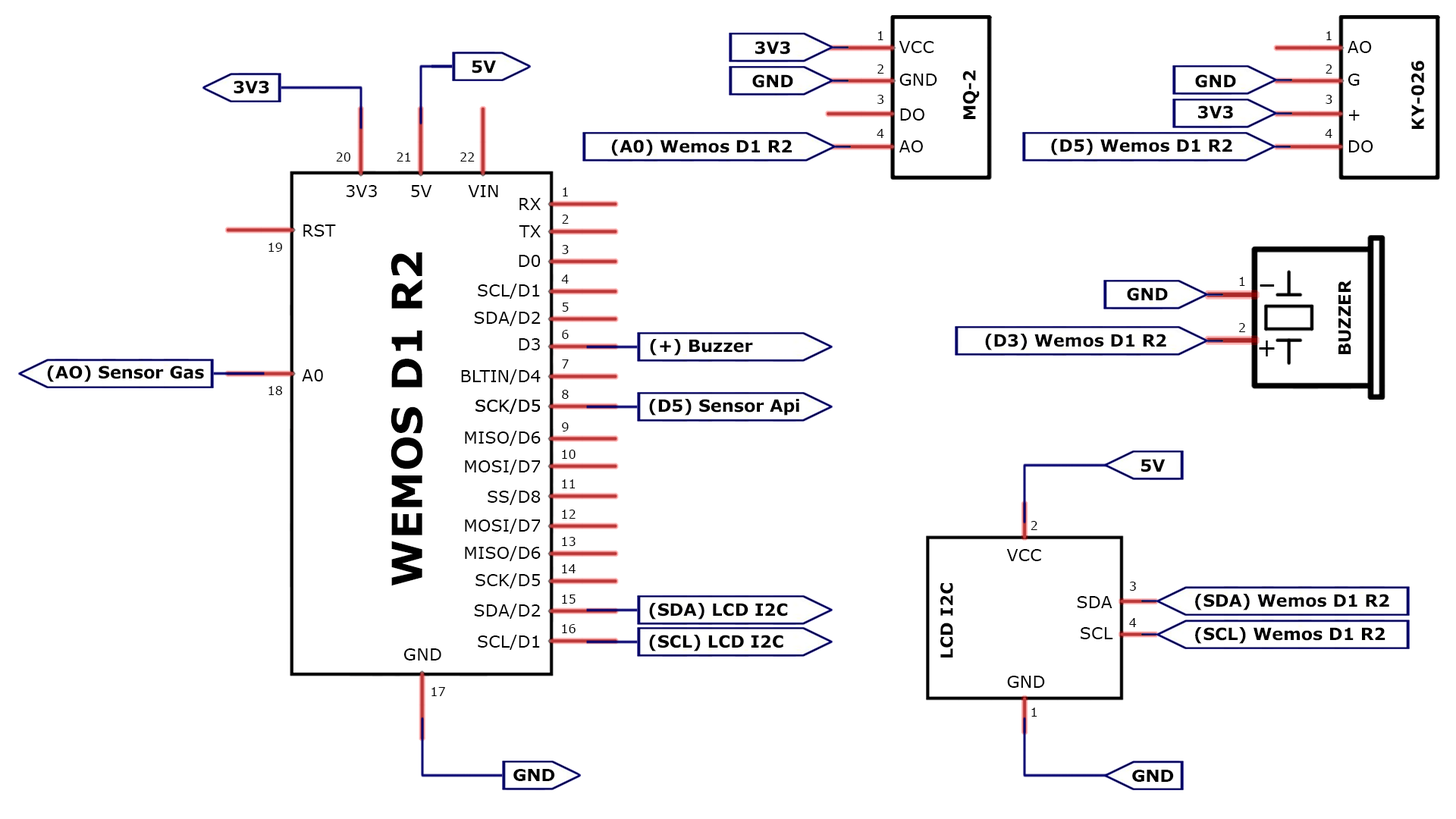
<style>
.page{position:relative;width:1456px;height:819px;background:#ffffff}
.page>*{position:absolute;margin:0}
.t1{font:17px "Verdana-Bold";color:#000000}
.t2{font:12.1px "Verdana";color:#000000}
.t3{font:17px "Verdana";color:#000000}
.t4{font:16.9px "Verdana-Bold";color:#000000}
.t5{font:17.1px "Verdana-Bold";color:#000000}
.t6{font:42.1px "Verdana-Bold";color:#000000}
.t7{font:24.6px "Verdana";color:#000000;scale:1.87 1}
.t8{font:24.9px "Verdana";color:#000000}
</style>
<div class="page">
<p class="t1" style="left:755px;top:41px;width:35px;height:14px">3V3</p>
<p class="t2" style="left:878px;top:31px;width:5px;height:9px">1</p>
<p class="t3" style="left:899px;top:41px;width:35px;height:12px">VCC</p>
<p class="t2" style="left:1326px;top:31px;width:6px;height:9px">1</p>
<p class="t3" style="left:1348px;top:41px;width:24px;height:12px">AO</p>
<p class="t4" style="left:472px;top:60px;width:24px;height:14px">5V</p>
<p class="t2" style="left:877px;top:64px;width:7px;height:10px">2</p>
<p class="t2" style="left:1326px;top:64px;width:6px;height:10px">2</p>
<p class="t5" style="left:1411px;top:61px;width:13px;height:68px;rotate:-90deg">KY-026</p>
<p class="t1" style="left:752px;top:74px;width:41px;height:14px">GND</p>
<p class="t3" style="left:899px;top:74px;width:38px;height:12px">GND</p>
<p class="t5" style="left:962px;top:71px;width:18px;height:48px;rotate:-90deg">MQ-2</p>
<p class="t1" style="left:1195px;top:74px;width:41px;height:14px">GND</p>
<p class="t3" style="left:1348px;top:74px;width:12px;height:12px">G</p>
<p class="t4" style="left:234px;top:80px;width:35px;height:14px">3V3</p>
<p class="t2" style="left:877px;top:95px;width:7px;height:9px">3</p>
<p class="t2" style="left:1326px;top:95px;width:6px;height:9px">3</p>
<p class="t3" style="left:900px;top:108px;width:24px;height:13px">DO</p>
<p class="t1" style="left:1198px;top:105px;width:35px;height:14px">3V3</p>
<p class="t3" style="left:1348px;top:110px;width:12px;height:11px">+</p>
<p class="t2" style="left:877px;top:129px;width:7px;height:9px">4</p>
<p class="t2" style="left:1325px;top:129px;width:7px;height:9px">4</p>
<p class="t1" style="left:611px;top:140px;width:181px;height:16px">(A0) Wemos D1 R2</p>
<p class="t3" style="left:899px;top:140px;width:24px;height:12px">AO</p>
<p class="t1" style="left:1051px;top:139px;width:181px;height:16px">(D5) Wemos D1 R2</p>
<p class="t3" style="left:1348px;top:140px;width:25px;height:12px">DO</p>
<p class="t2" style="left:336px;top:152px;width:14px;height:10px">20</p>
<p class="t2" style="left:397px;top:152px;width:14px;height:10px">21</p>
<p class="t2" style="left:460px;top:152px;width:15px;height:10px">22</p>
<p class="t3" style="left:346px;top:185px;width:31px;height:12px">3V3</p>
<p class="t3" style="left:411px;top:185px;width:21px;height:12px">5V</p>
<p class="t3" style="left:468px;top:185px;width:30px;height:12px">VIN</p>
<p class="t3" style="left:519px;top:198px;width:22px;height:12px">RX</p>
<p class="t2" style="left:563px;top:187px;width:5px;height:9px">1</p>
<p class="t2" style="left:562px;top:215px;width:7px;height:9px">2</p>
<p class="t3" style="left:303px;top:224px;width:33px;height:13px">RST</p>
<p class="t3" style="left:519px;top:225px;width:22px;height:12px">TX</p>
<p class="t2" style="left:268px;top:243px;width:14px;height:9px">19</p>
<p class="t2" style="left:562px;top:245px;width:7px;height:9px">3</p>
<p class="t6" style="left:391px;top:252px;width:32px;height:334px;rotate:-90deg">WEMOS D1 R2</p>
<p class="t3" style="left:519px;top:255px;width:22px;height:12px">D0</p>
<p class="t2" style="left:561px;top:275px;width:8px;height:9px">4</p>
<p class="t2" style="left:1239px;top:277px;width:6px;height:9px">1</p>
<p class="t5" style="left:1338px;top:280px;width:13px;height:74px;rotate:-90deg">BUZZER</p>
<p class="t3" style="left:478px;top:284px;width:62px;height:15px">SCL/D1</p>
<p class="t1" style="left:1127px;top:287px;width:41px;height:14px">GND</p>
<p class="t7" style="left:1260px;top:284px;width:15px;height:3px">-</p>
<p class="t2" style="left:562px;top:303px;width:7px;height:9px">5</p>
<p class="t3" style="left:474px;top:311px;width:67px;height:15px">SDA/D2</p>
<p class="t2" style="left:562px;top:330px;width:7px;height:9px">6</p>
<p class="t2" style="left:1239px;top:323px;width:6px;height:9px">2</p>
<p class="t3" style="left:519px;top:338px;width:21px;height:12px">D3</p>
<p class="t4" style="left:650px;top:339px;width:103px;height:17px">(+) Buzzer</p>
<p class="t1" style="left:985px;top:334px;width:181px;height:16px">(D3) Wemos D1 R2</p>
<p class="t8" style="left:1259px;top:340px;width:16px;height:16px">+</p>
<p class="t4" style="left:47px;top:366px;width:157px;height:16px">(AO) Sensor Gas</p>
<p class="t2" style="left:562px;top:359px;width:7px;height:10px">7</p>
<p class="t3" style="left:302px;top:369px;width:21px;height:12px">A0</p>
<p class="t3" style="left:461px;top:369px;width:80px;height:15px">BLTIN/D4</p>
<p class="t2" style="left:268px;top:386px;width:15px;height:9px">18</p>
<p class="t2" style="left:562px;top:390px;width:7px;height:9px">8</p>
<p class="t3" style="left:475px;top:399px;width:65px;height:15px">SCK/D5</p>
<p class="t3" style="left:475px;top:399px;width:65px;height:15px">SCK/D5</p>
<p class="t4" style="left:649px;top:399px;width:150px;height:17px">(D5) Sensor Api</p>
<p class="t2" style="left:562px;top:422px;width:7px;height:9px">9</p>
<p class="t3" style="left:465px;top:431px;width:76px;height:15px">MISO/D6</p>
<p class="t2" style="left:562px;top:450px;width:14px;height:9px">10</p>
<p class="t3" style="left:465px;top:460px;width:76px;height:15px">MOSI/D7</p>
<p class="t4" style="left:1141px;top:459px;width:25px;height:13px">5V</p>
<p class="t2" style="left:562px;top:479px;width:14px;height:9px">11</p>
<p class="t3" style="left:488px;top:490px;width:53px;height:15px">SS/D8</p>
<p class="t2" style="left:562px;top:510px;width:14px;height:9px">12</p>
<p class="t3" style="left:465px;top:519px;width:76px;height:15px">MOSI/D7</p>
<p class="t2" style="left:1031px;top:521px;width:6px;height:9px">2</p>
<p class="t3" style="left:465px;top:546px;width:76px;height:15px">MISO/D6</p>
<p class="t2" style="left:562px;top:537px;width:14px;height:9px">13</p>
<p class="t3" style="left:1006px;top:549px;width:35px;height:12px">VCC</p>
<p class="t2" style="left:562px;top:564px;width:14px;height:9px">14</p>
<p class="t3" style="left:475px;top:573px;width:65px;height:15px">SCK/D5</p>
<p class="t2" style="left:1129px;top:582px;width:7px;height:9px">3</p>
<p class="t4" style="left:940px;top:583px;width:13px;height:74px;rotate:-90deg">LCD I2C</p>
<p class="t1" style="left:1195px;top:594px;width:194px;height:16px">(SDA) Wemos D1 R2</p>
<p class="t3" style="left:474px;top:604px;width:67px;height:15px">SDA/D2</p>
<p class="t2" style="left:562px;top:595px;width:14px;height:9px">15</p>
<p class="t4" style="left:649px;top:603px;width:139px;height:17px">(SDA) LCD I2C</p>
<p class="t3" style="left:1077px;top:596px;width:35px;height:12px">SDA</p>
<p class="t2" style="left:562px;top:624px;width:14px;height:9px">16</p>
<p class="t3" style="left:1081px;top:627px;width:32px;height:12px">SCL</p>
<p class="t2" style="left:1129px;top:618px;width:8px;height:9px">4</p>
<p class="t1" style="left:1195px;top:627px;width:190px;height:17px">(SCL) Wemos D1 R2</p>
<p class="t3" style="left:478px;top:635px;width:62px;height:15px">SCL/D1</p>
<p class="t4" style="left:649px;top:635px;width:134px;height:16px">(SCL) LCD I2C</p>
<p class="t3" style="left:403px;top:648px;width:38px;height:12px">GND</p>
<p class="t3" style="left:1007px;top:676px;width:38px;height:12px">GND</p>
<p class="t2" style="left:431px;top:687px;width:14px;height:9px">17</p>
<p class="t2" style="left:1031px;top:708px;width:6px;height:9px">1</p>
<p class="t4" style="left:513px;top:769px;width:42px;height:12px">GND</p>
<p class="t4" style="left:1132px;top:770px;width:42px;height:12px">GND</p>
</div>
